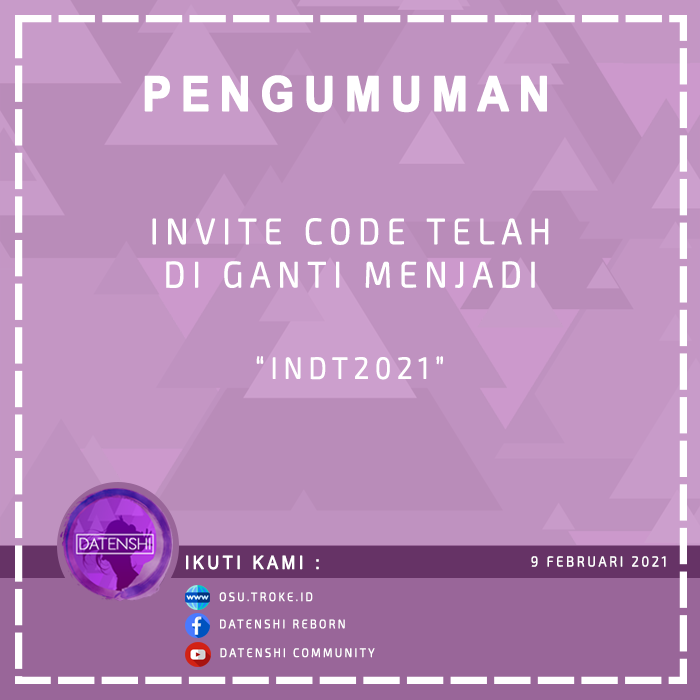
<style>
.page{position:relative;width:700px;height:700px;background:#bf92c0}
.page>*{position:absolute;margin:0}
.t1{font:48px "Arial-BoldMT";letter-spacing:0.2em;color:#ffffff;text-transform:uppercase;font-weight:bold;scale:0.9 1}
.t2{font:36px "Exo2.0-Light";letter-spacing:0.2em;color:#ffffff;text-transform:uppercase;font-weight:bold;scale:0.9 1}
.t3{font:30px "Exo2.0-Light";letter-spacing:0.2em;color:#ffffff;text-transform:uppercase;font-weight:bold;scale:0.9 1}
.t4{font:18px "ArialMT";letter-spacing:0.2em;color:#ffffff;text-transform:uppercase;font-weight:bold;scale:0.9 1}
.t5{font:14px "Exo2.0-Light";letter-spacing:0.2em;color:#ffffff;text-transform:uppercase;font-weight:bold;scale:0.9 1}
.t6{font:12px "Exo2.0-Light";letter-spacing:0.2em;color:#ffffff;text-transform:uppercase;font-weight:bold;scale:0.9 1}
</style>
<div class="page">
<p class="t1" style="left:144px;top:75px;width:403px;height:38px">PENGUMUMAN</p>
<p class="t2" style="left:152px;top:218px;width:397px;height:70px;text-align:center">INVITE CODE TELAH <br>DI GANTI MENJADI</p>
<p class="t3" style="left:256px;top:356px;width:187px;height:24px">“INDT2021”</p>
<p class="t4" style="left:186px;top:555px;width:133px;height:15px">ikuti kami :</p>
<p class="t5" style="left:531px;top:556px;width:135px;height:11px">9 Februari 2021</p>
<p class="t6" style="left:219px;top:592px;width:94px;height:10px">osu.troke.id</p>
<p class="t6" style="left:220px;top:619px;width:125px;height:10px">DATENSHI REBORN</p>
<p class="t6" style="left:220px;top:648px;width:155px;height:10px">DATENSHI COMMUNITY</p>
</div>
